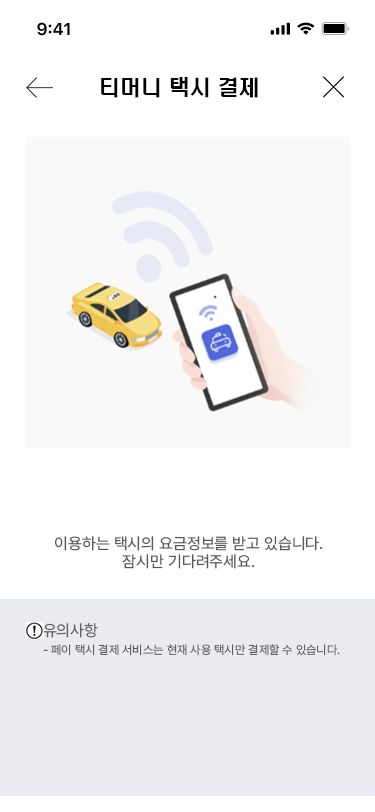
<style>
.page{position:relative;width:375px;height:812px;background:#ffffff}
.page>*{position:absolute;margin:0}
.t1{font:21px "H2hdrM";color:#030303}
.t2{font:16px/18px "Pretendard-Regular";color:#56575a}
.t3{font:12px/18px "Pretendard-Regular";color:#616165}
.t4{font:16px/18px "Pretendard-Regular";color:#616165}
</style>
<div class="page">
<p class="t1" style="left:101px;top:77px;width:157px;height:21px">티머니 택시 결제</p>
<p class="t2" style="left:55px;top:536px;width:268px;height:33px;text-align:center">이용하는 택시의 요금정보를 받고 있습니다.<br>잠시만 기다려주세요.</p>
<p class="t3" style="left:43px;top:623px;width:297px;height:33px"><span class="t4">유의사항<br></span>- 페이 택시 결제 서비스는 현재 사용 택시만 결제할 수 있습니다.</p>
</div>
